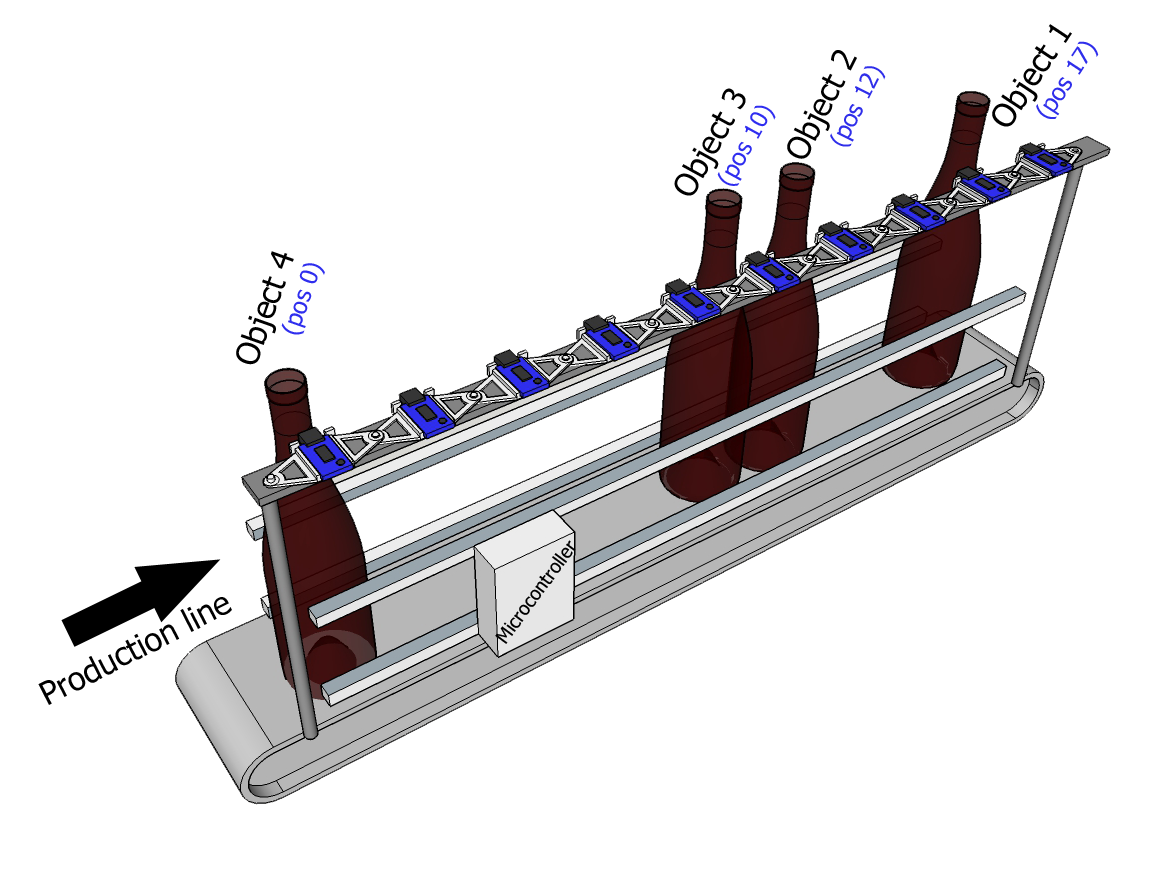
<style>
.page{position:relative;width:1156px;height:894px;background:#ffffff}
.page>*{position:absolute;margin:0}
.t1{font:32px "Tahoma";color:#000000}
.t2{font:24px "Tahoma";color:#2f2eeb}
.t3{font:24px "Tahoma";color:#2f2eea}
.t4{font:24px "Tahoma";color:#2f2df0}
.t5{font:24px "Tahoma";color:#2f2eee}
.t6{font:18.7px "Tahoma";color:#000000}
</style>
<div class="page">
<p class="t1" style="left:992px;top:24px;width:107px;height:103px;text-align:right;rotate:-57deg">Object 1<br><span class="t2">(pos 17)</span></p>
<p class="t1" style="left:787px;top:50px;width:99px;height:109px;text-align:right;rotate:-63deg">Object 2<br><span class="t3">(pos 12)</span></p>
<p class="t1" style="left:674px;top:88px;width:102px;height:108px;text-align:right;rotate:-61deg">Object 3<br><span class="t4">(pos 10)</span></p>
<p class="t1" style="left:236px;top:251px;width:89px;height:114px;text-align:right;rotate:-71deg">Object 4<br><span class="t5">(pos 0)</span></p>
<p class="t6" style="left:495px;top:540px;width:81px;height:104px;rotate:-54deg">Microcontroller</p>
<p class="t1" style="left:38px;top:597px;width:194px;height:108px;rotate:-27deg">Production line</p>
</div>
